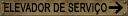
<style>
.page{position:relative;width:128px;height:16px}
.page>*{position:absolute;margin:0}
.t1{font:12px "ArialMT";letter-spacing:0.02em;color:#000000;text-transform:uppercase;font-weight:bold;scale:0.68 1}
</style>
<div class="page">
<p class="t1" style="left:4px;top:2px;width:103px;height:13px">elevador de serviço</p>
</div>
